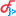
<style>
.page{position:relative;width:16px;height:16px;background:#ffffff}
.page>*{position:absolute;margin:0}
.t1{font:14px "HarlowSolid";color:#e7313e}
</style>
<div class="page">
<p class="t1" style="left:0px;top:0px;width:15px;height:13px">F</p>
</div>
